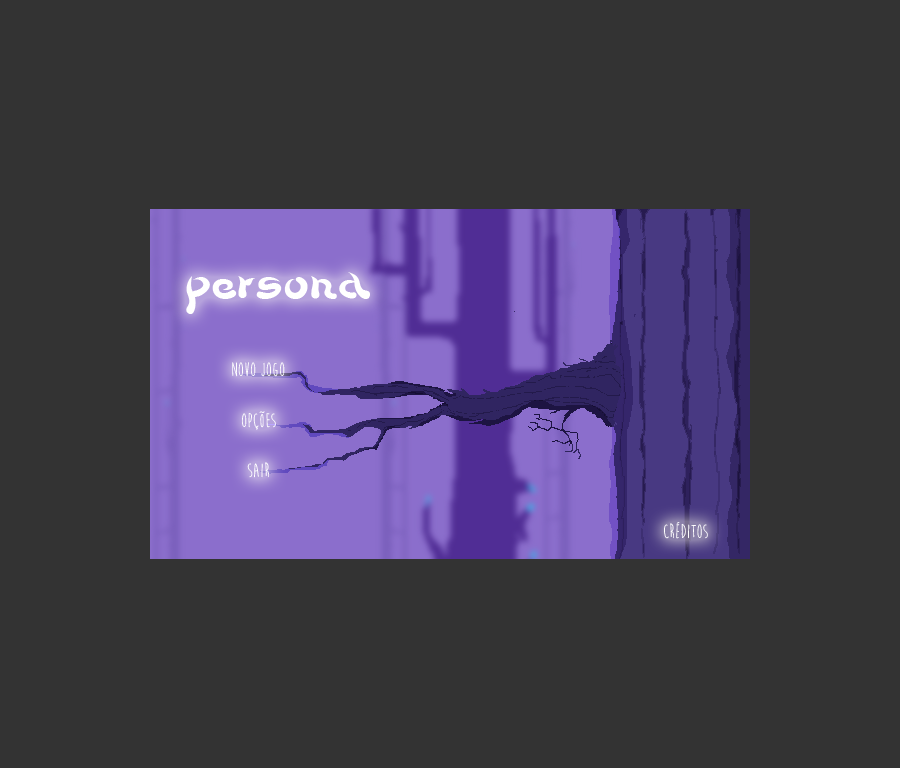
<style>
.page{position:relative;width:900px;height:768px;background:#333333}
.page>*{position:absolute;margin:0}
.t1{font:55px "Beech";color:#ffffff}
.t2{font:20px "MoonFlower";color:#ffffff}
</style>
<div class="page">
<p class="t1" style="left:186px;top:272px;width:184px;height:42px">persona</p>
<p class="t2" style="left:232px;top:362px;width:53px;height:15px">novo jogo</p>
<p class="t2" style="left:242px;top:411px;width:34px;height:19px">opções</p>
<p class="t2" style="left:247px;top:462px;width:22px;height:16px">sair</p>
<p class="t2" style="left:664px;top:522px;width:44px;height:17px">créditos</p>
</div>
